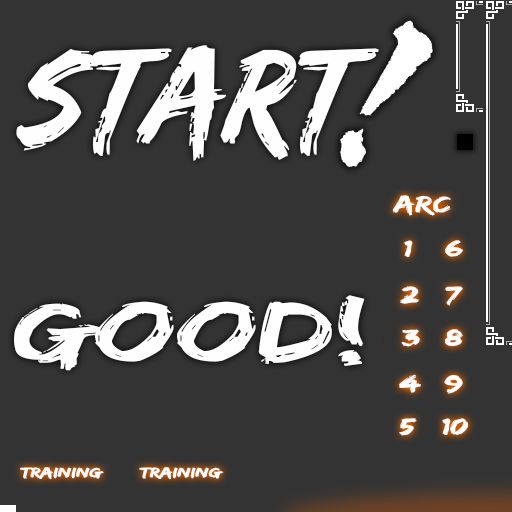
<style>
.page{position:relative;width:512px;height:512px;background:#333333}
.page>*{position:absolute;margin:0}
.t1{font:143.2px "EdoSZ";color:#fffefe;scale:0.94 1}
.t2{font:24px "EdoSZ";color:#fffefe;scale:1.5 1}
.t3{font:90px "EdoSZ";color:#fffefe;scale:1.5 1}
.t4{font:14px "EdoSZ";color:#fffefe;scale:1.5 1}
</style>
<div class="page">
<p class="t1" style="left:16px;top:45px;width:363px;height:116px">START</p>
<p class="t2" style="left:392px;top:195px;width:59px;height:21px">ARC</p>
<p class="t2" style="left:404px;top:240px;width:9px;height:17px">1</p>
<p class="t2" style="left:445px;top:240px;width:18px;height:17px">6</p>
<p class="t2" style="left:400px;top:286px;width:19px;height:18px">2</p>
<p class="t2" style="left:445px;top:286px;width:18px;height:20px">7</p>
<p class="t3" style="left:14px;top:295px;width:351px;height:76px">GOOD!</p>
<p class="t2" style="left:401px;top:329px;width:19px;height:18px">3</p>
<p class="t2" style="left:444px;top:329px;width:19px;height:18px">8</p>
<p class="t2" style="left:399px;top:374px;width:22px;height:19px">4</p>
<p class="t2" style="left:444px;top:375px;width:19px;height:19px">9</p>
<p class="t2" style="left:399px;top:418px;width:18px;height:18px">5</p>
<p class="t2" style="left:442px;top:418px;width:27px;height:17px">10</p>
<p class="t4" style="left:20px;top:467px;width:84px;height:13px">training</p>
<p class="t4" style="left:139px;top:467px;width:85px;height:13px">training</p>
</div>
